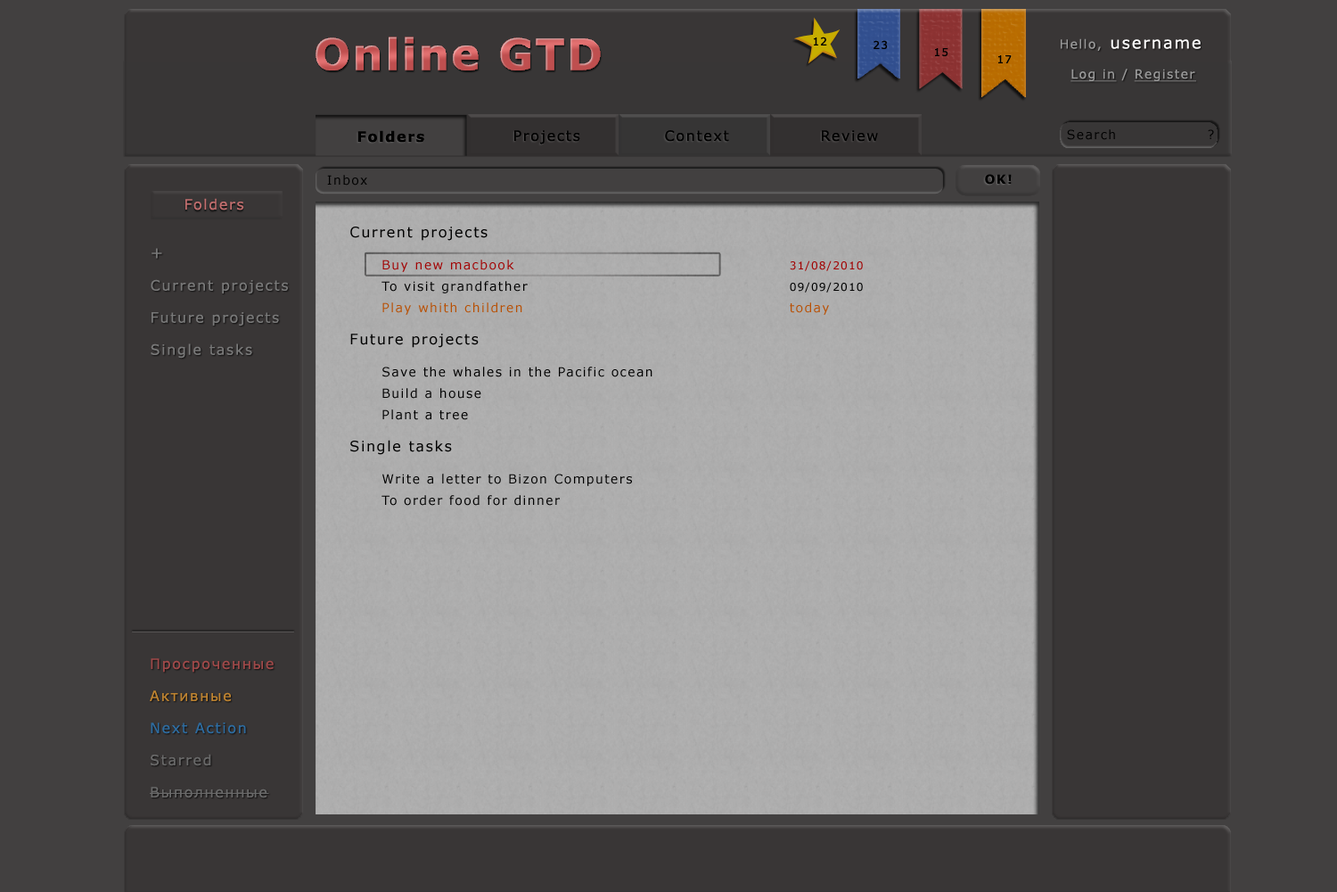
<style>
.page{position:relative;width:1337px;height:892px;background:#393636}
.page>*{position:absolute;margin:0}
.t1{font:42.8px "Verdana-Bold";letter-spacing:0.05em;color:#bf4f4f}
.t2{font:10.7px "Verdana";letter-spacing:0.1em;color:#000000}
.t3{font:16px "Verdana";letter-spacing:0.1em;color:#ffffff}
.t4{font:12.5px "Verdana";letter-spacing:0.1em;color:#999999}
.t5{font:12.5px "Verdana";letter-spacing:0.1em;color:#999999;text-decoration:underline}
.t6{font:14.3px "Verdana-Bold";letter-spacing:0.1em;color:#000000}
.t7{font:14.3px "Verdana";letter-spacing:0.1em;color:#000000}
.t8{font:12.5px "Verdana";letter-spacing:0.1em;color:#000000}
.t9{font:12.5px "Verdana-Bold";letter-spacing:0.1em;color:#000000}
.t10{font:14.3px "Verdana";letter-spacing:0.1em;color:#c26d6d}
.t11{font:12.5px/21.4px "Verdana";letter-spacing:0.1em;color:#010101}
.t12{font:14.3px/32.1px "Verdana";letter-spacing:0.1em;color:#010101}
.t13{font:12.5px/21.4px "Verdana";letter-spacing:0.1em;color:#a20303}
.t14{font:10.7px/21.4px "Verdana";letter-spacing:0.1em;color:#a20303}
.t15{font:10.7px/21.4px "Verdana";letter-spacing:0.1em;color:#010101}
.t16{font:12.5px/21.4px "Verdana";letter-spacing:0.1em;color:#b85004}
.t17{font:12.5px/32.1px "Verdana";letter-spacing:0.1em;color:#010101}
.t18{font:14.3px/32.1px "Verdana";letter-spacing:0.1em;color:#787878}
.t19{font:16px/32.1px "Verdana";letter-spacing:0.1em;color:#787878}
.t20{font:14.3px/32.1px "Verdana";letter-spacing:0.1em}
</style>
<div class="page">
<p class="t1" style="left:316px;top:37px;width:285px;height:33px">Online GTD</p>
<p class="t2" style="left:814px;top:37px;width:13px;height:8px">12</p>
<p class="t2" style="left:874px;top:40px;width:14px;height:9px">23</p>
<p class="t3" style="left:1061px;top:38px;width:140px;height:44px"><span class="t4">Hello, </span>username<br>  <br>  <span class="t5">Log in</span><span class="t4"> / </span><span class="t5">Register</span></p>
<p class="t2" style="left:935px;top:48px;width:14px;height:8px">15</p>
<p class="t2" style="left:999px;top:55px;width:13px;height:8px">17</p>
<p class="t6" style="left:358px;top:130px;width:66px;height:13px">Folders</p>
<p class="t7" style="left:514px;top:130px;width:66px;height:14px">Projects</p>
<p class="t7" style="left:665px;top:130px;width:64px;height:12px">Context</p>
<p class="t7" style="left:822px;top:130px;width:56px;height:12px">Review</p>
<p class="t8" style="left:1067px;top:129px;width:147px;height:11px">Search                ?</p>
<p class="t9" style="left:985px;top:174px;width:27px;height:11px">OK!</p>
<p class="t8" style="left:327px;top:175px;width:40px;height:10px">Inbox</p>
<p class="t10" style="left:185px;top:198px;width:59px;height:12px">Folders</p>
<p class="t11" style="left:350px;top:226px;width:513px;height:280px"><span class="t12">Current projects<br> </span><span class="t13">Buy new macbook             </span><span class="t14">31/08/2010         <br> </span>To visit grandfather             <span class="t15">09/09/2010<br> </span><span class="t16">Play whith children            today<br></span><span class="t12">Future projects<br> </span>Save the whales in the Pacific ocean<br> Build a house<br> Plant a tree<br><span class="t12">Single tasks<br> </span><span class="t17">Write a letter t</span>o Bizon Computers<br> To order food for dinner</p>
<p class="t18" style="left:151px;top:248px;width:138px;height:110px"><span class="t19">+<br></span>Current projects<br>Future projects<br>Single tasks</p>
<p class="t20" style="left:150px;top:658px;width:124px;height:140px">Просроченные<br>Активные<br>Next Action<br>Starred<br>Выполненные</p>
</div>
